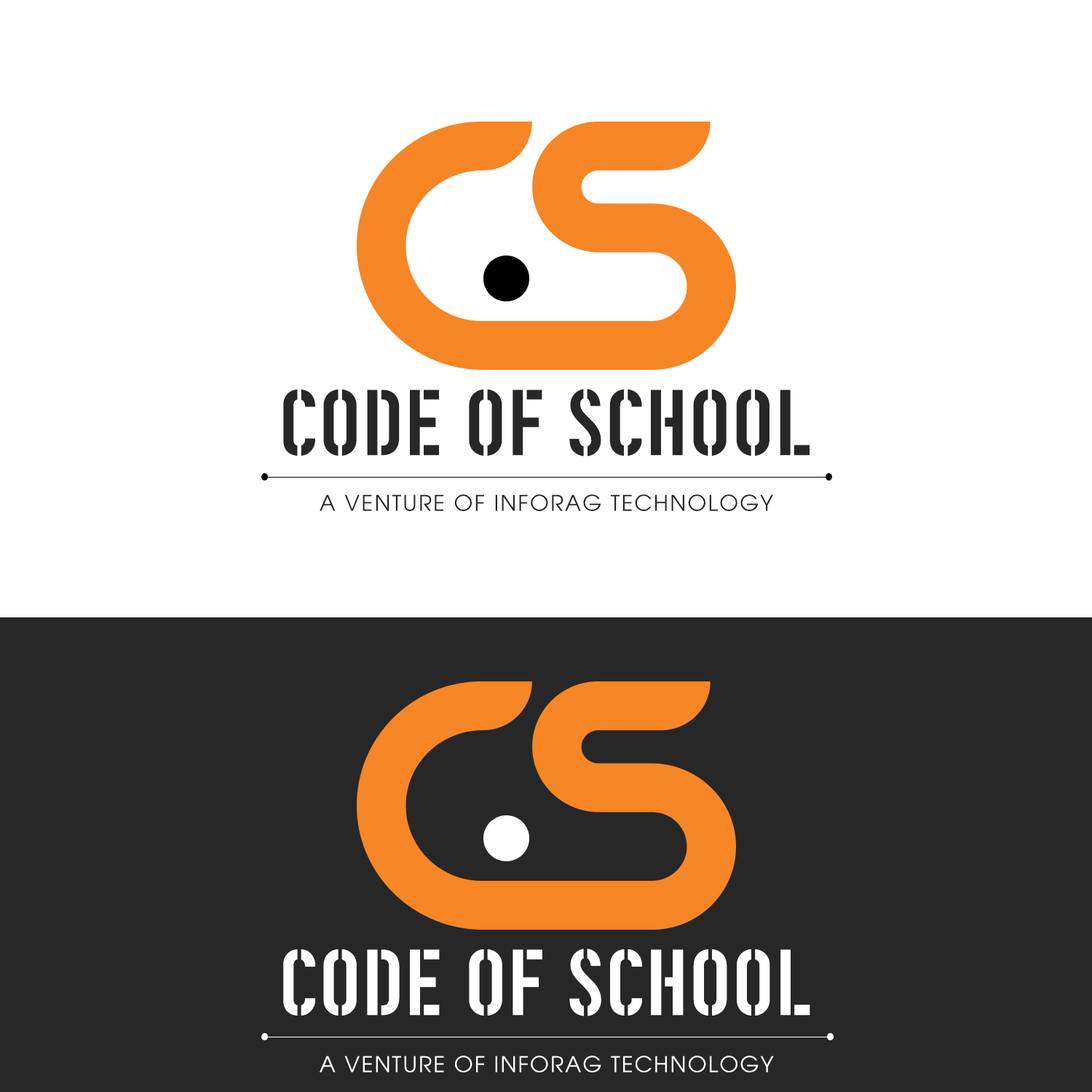
<style>
.page{position:relative;width:1092px;height:1092px;background:#ffffff}
.page>*{position:absolute;margin:0}
.t1{font:93.3px "OmbudsmanAlternateRegular";color:#272727;text-transform:uppercase}
.t2{font:21.8px "Avalon-Regular";letter-spacing:0.07em;color:#272727;text-transform:uppercase}
.t3{font:93.3px "OmbudsmanAlternateRegular";color:#ffffff;text-transform:uppercase}
.t4{font:21.8px "Avalon-Regular";letter-spacing:0.07em;color:#ffffff;text-transform:uppercase}
</style>
<div class="page">
<p class="t1" style="left:283px;top:389px;width:527px;height:67px">Code Of School</p>
<p class="t2" style="left:320px;top:494px;width:453px;height:17px">A Venture Of InfoRaG technology</p>
<p class="t3" style="left:283px;top:949px;width:527px;height:67px">Code Of School</p>
<p class="t4" style="left:320px;top:1056px;width:454px;height:16px">A Venture Of InfoRaG technology</p>
</div>
